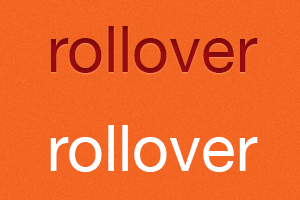
<style>
.page{position:relative;width:300px;height:200px}
.page>*{position:absolute;margin:0}
.t1{font:64px "HelveticaNeue";color:#9e0b0f}
.t2{font:64px "HelveticaNeue";color:#ffffff}
</style>
<div class="page">
<p class="t1" style="left:50px;top:26px;width:208px;height:47px">rollover</p>
<p class="t2" style="left:50px;top:125px;width:208px;height:47px">rollover</p>
</div>
